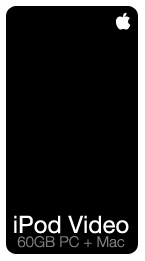
<style>
.page{position:relative;width:145px;height:261px;background:#000000}
.page>*{position:absolute;margin:0}
.t1{font:15px/14px "HelveticaNeue-Light";color:#7f7f7f}
.t2{font:24px/14px "HelveticaNeue";color:#ffffff}
</style>
<div class="page">
<p class="t1" style="left:14px;top:215px;width:115px;height:33px;text-align:center"><span class="t2">iPod Video<br></span>60GB PC + Mac</p>
</div>
